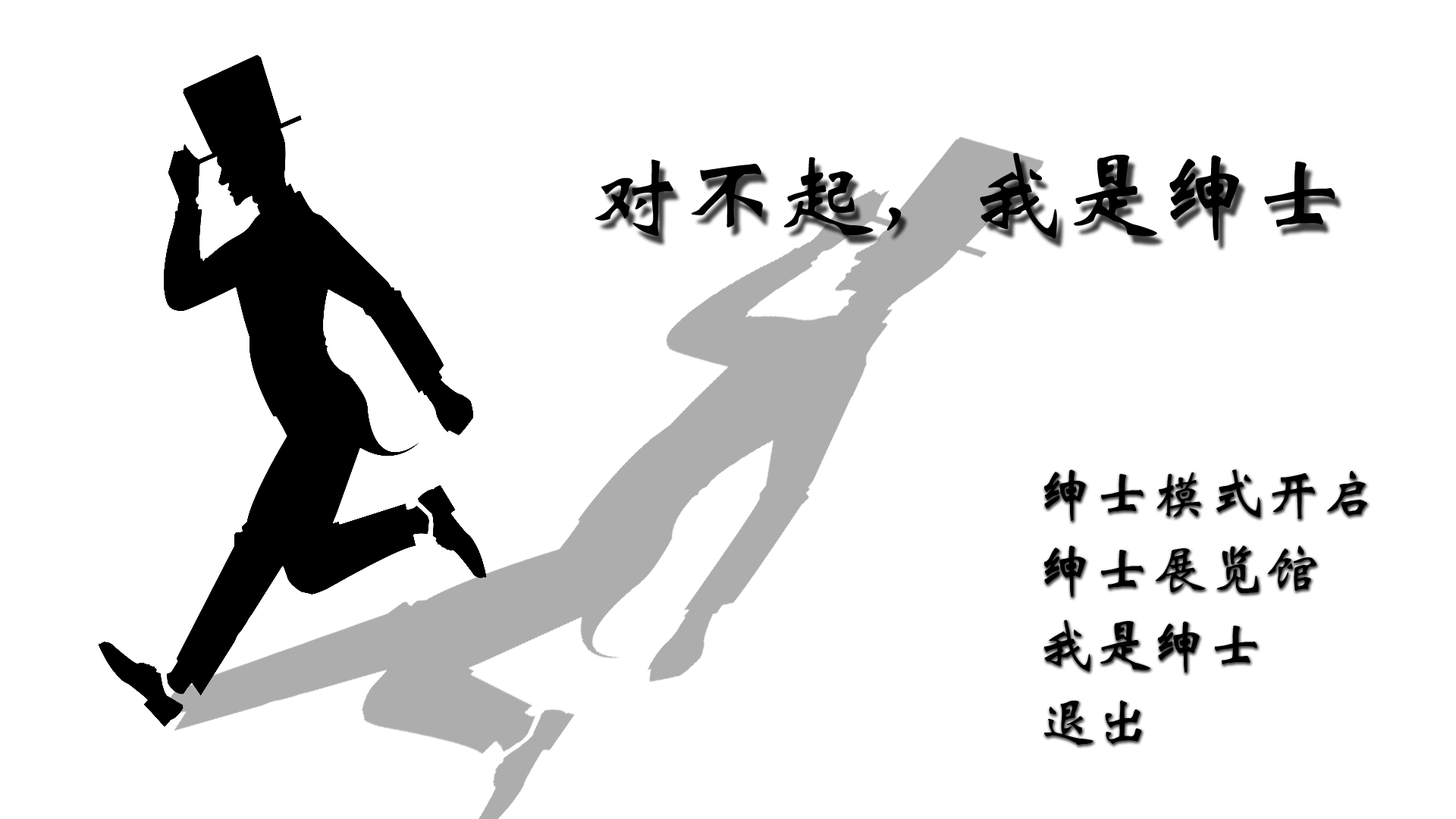
<style>
.page{position:relative;width:1456px;height:819px;background:#ffffff}
.page>*{position:absolute;margin:0}
.t1{font:94.8px "STXinwei";color:#000000}
.t2{font:56.9px/75.8px "STXinwei";color:#000000}
</style>
<div class="page">
<p class="t1" style="left:595px;top:152px;width:740px;height:89px">对不起，我是绅士</p>
<p class="t2" style="left:1043px;top:469px;width:324px;height:276px">绅士模式开启<br>绅士展览馆<br>我是绅士<br>退出</p>
</div>
